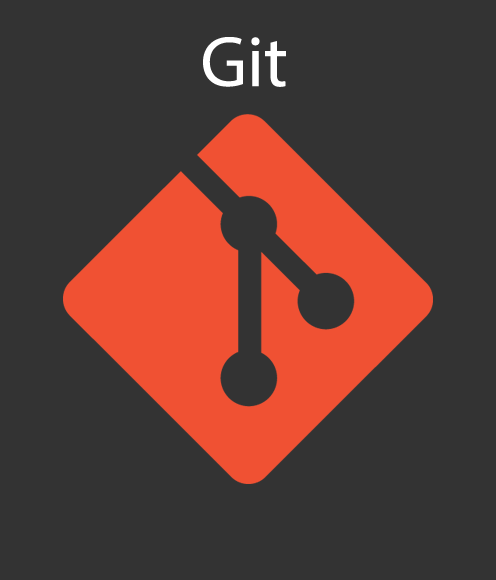
<style>
.page{position:relative;width:496px;height:580px;background:#333333}
.page>*{position:absolute;margin:0}
.t1{font:72px "MyriadPro-Regular";color:#ffffff}
</style>
<div class="page">
<p class="t1" style="left:203px;top:37px;width:83px;height:50px">Git</p>
</div>
